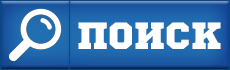
<style>
.page{position:relative;width:230px;height:70px}
.page>*{position:absolute;margin:0}
.t1{font:38px "SportsWorld";color:#ffffff}
</style>
<div class="page">
<p class="t1" style="left:78px;top:22px;width:143px;height:27px">ПОИСК</p>
</div>
